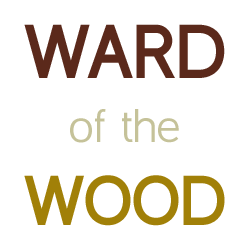
<style>
.page{position:relative;width:250px;height:250px;background:#ffffff}
.page>*{position:absolute;margin:0}
.t1{font:75.9px "BerlinBold";letter-spacing:0.025em;color:#5b291b;text-transform:uppercase}
.t2{font:47px "Berlin";letter-spacing:0.025em;color:#c5c299}
.t3{font:70.4px "BerlinBold";letter-spacing:0.025em;color:#a18008;text-transform:uppercase}
</style>
<div class="page">
<p class="t1" style="left:24px;top:24px;width:201px;height:54px">Ward</p>
<p class="t2" style="left:70px;top:109px;width:109px;height:34px">of the</p>
<p class="t3" style="left:24px;top:175px;width:201px;height:51px">WOOD</p>
</div>
